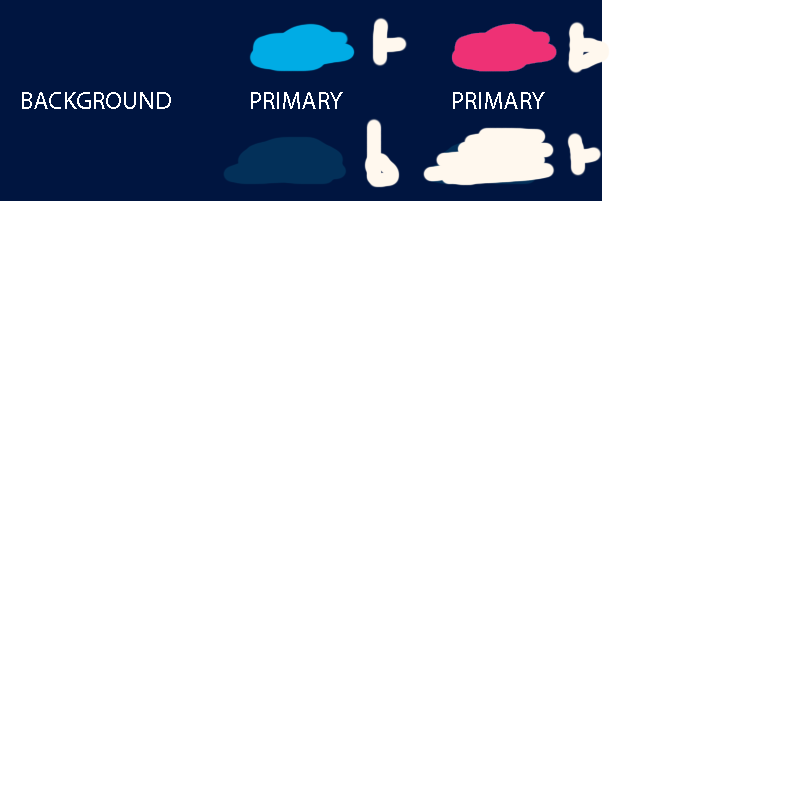
<style>
.page{position:relative;width:800px;height:800px;background:#ffffff}
.page>*{position:absolute;margin:0}
.t1{font:25px "MyriadPro-Regular";color:#ffffff}
</style>
<div class="page">
<p class="t1" style="left:22px;top:92px;width:149px;height:17px">BACKGROUND</p>
<p class="t1" style="left:251px;top:92px;width:92px;height:17px">PRIMARY</p>
<p class="t1" style="left:453px;top:92px;width:92px;height:17px">PRIMARY</p>
</div>
